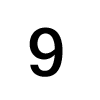
<style>
.page{position:relative;width:100px;height:100px;background:#ffffff}
.page>*{position:absolute;margin:0}
.t1{font:72px "Shruti-Bold";color:#000000}
</style>
<div class="page">
<p class="t1" style="left:29px;top:27px;width:34px;height:50px">9</p>
</div>
